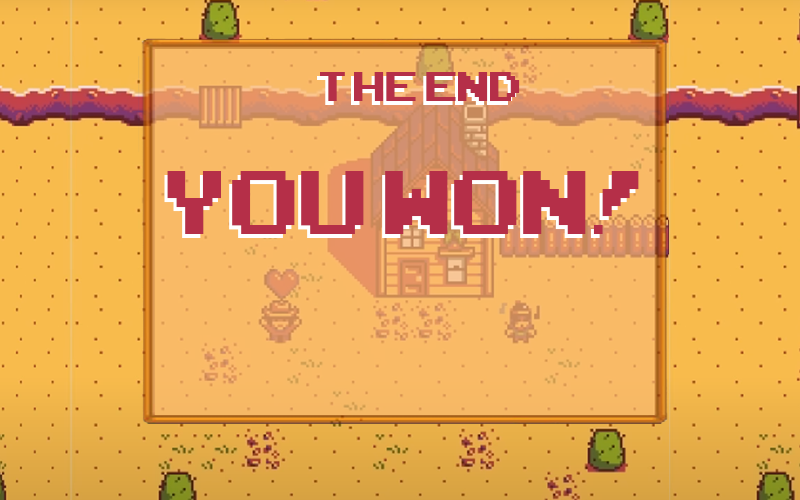
<style>
.page{position:relative;width:800px;height:500px}
.page>*{position:absolute;margin:0}
.t1{font:58.3px "ArcadeClassic";color:#b52f48}
.t2{font:125px "ArcadeClassic";color:#b52f48}
</style>
<div class="page">
<p class="t1" style="left:320px;top:72px;width:200px;height:29px">THE END</p>
<p class="t2" style="left:167px;top:171px;width:472px;height:63px">YOU WON!</p>
</div>
